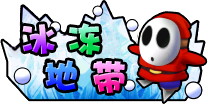
<style>
.page{position:relative;width:208px;height:104px;background:#ffffff}
.page>*{position:absolute;margin:0}
.t1{font:35px "DFPHaiBaoW12"}
</style>
<div class="page">
<p class="t1" style="left:22px;top:24px;width:33px;height:30px">冰</p>
<p class="t1" style="left:69px;top:23px;width:31px;height:32px">冻</p>
<p class="t1" style="left:45px;top:60px;width:32px;height:31px">地</p>
<p class="t1" style="left:93px;top:61px;width:32px;height:32px">带</p>
</div>
